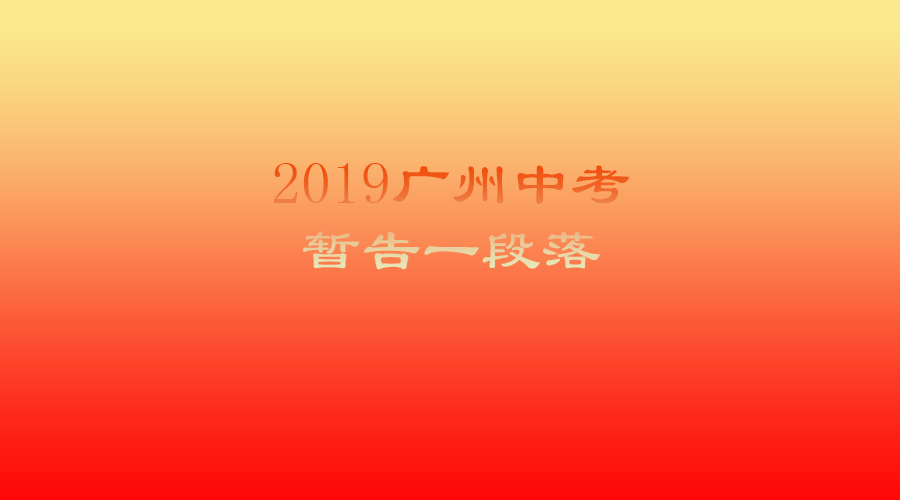
<style>
.page{position:relative;width:900px;height:500px}
.page>*{position:absolute;margin:0}
.t1{font:60px/66px "LiSu"}
</style>
<div class="page">
<p class="t1" style="left:274px;top:163px;width:355px;height:107px;text-align:center">2019广州中考<br>暂告一段落</p>
</div>
